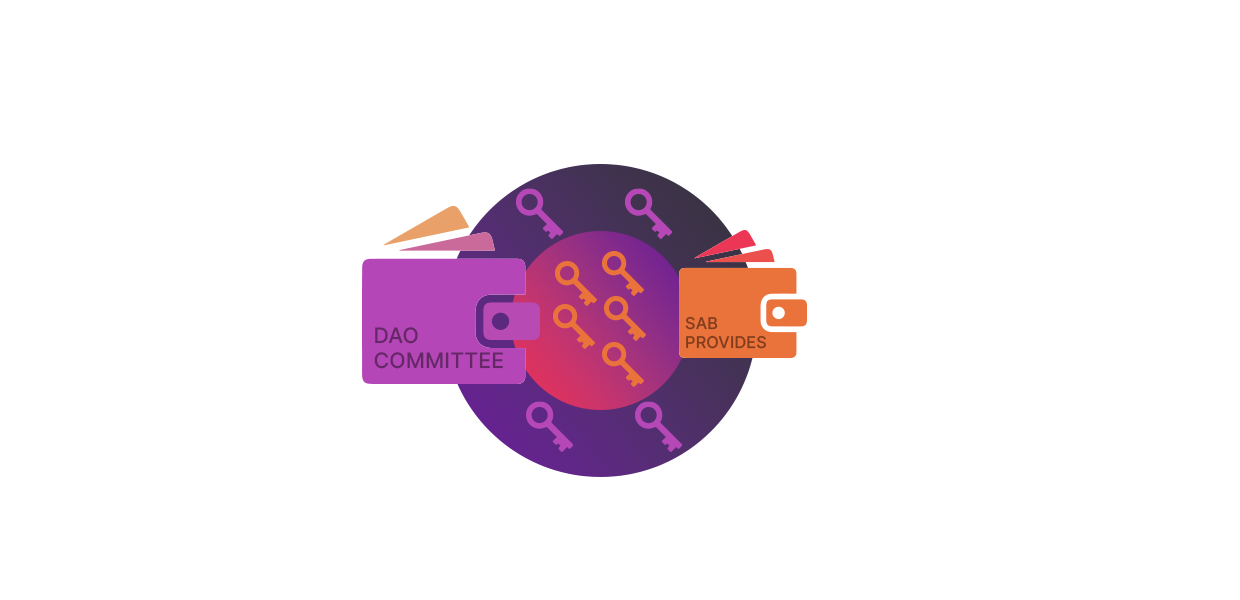
<style>
.page{position:relative;width:1240px;height:600px;background:#ffffff}
.page>*{position:absolute;margin:0}
.t1{font:16.2px "Inter-Medium";color:#813c1d;text-transform:uppercase}
.t2{font:21.2px "Inter-Medium";color:#652867;text-transform:uppercase}
</style>
<div class="page">
<p class="t1" style="left:685px;top:316px;width:81px;height:33px">SAB <br>provides</p>
<p class="t2" style="left:374px;top:327px;width:129px;height:42px">DAO <br>Committee</p>
</div>
